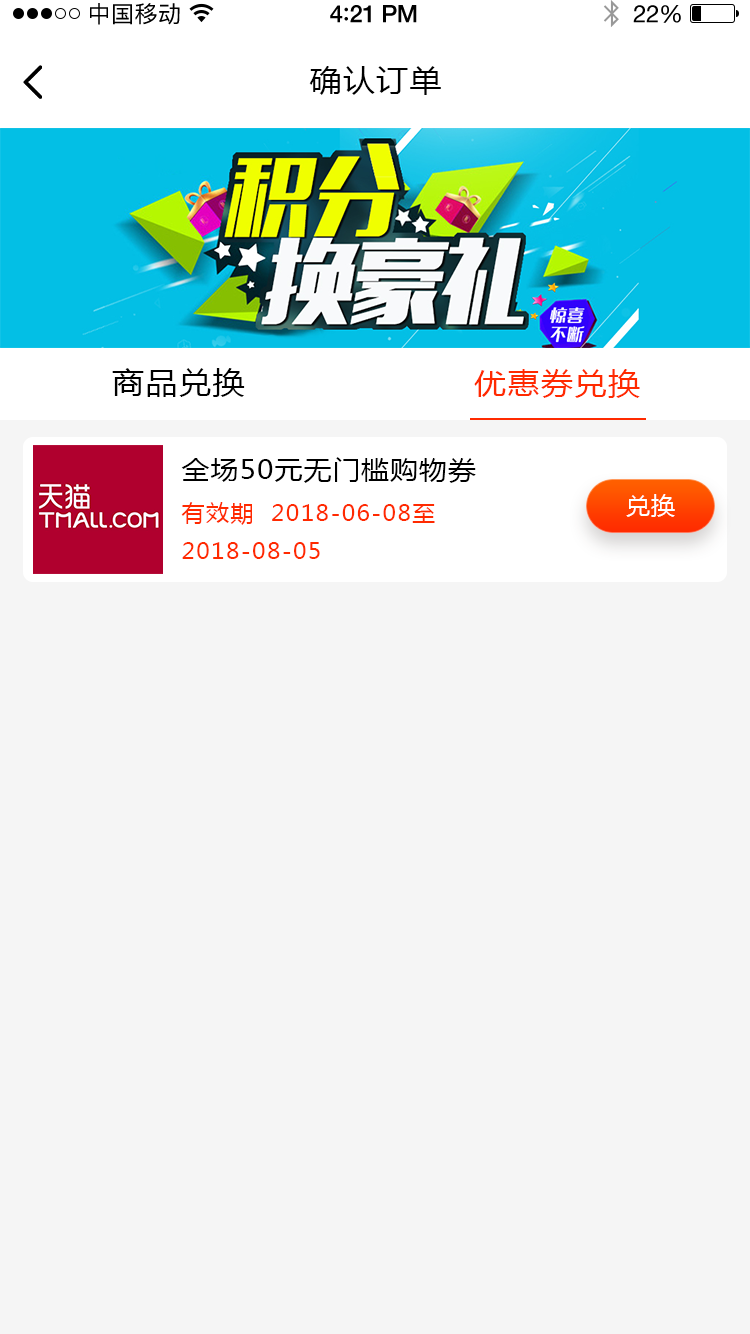
<style>
.page{position:relative;width:750px;height:1334px;background:#f5f5f5}
.page>*{position:absolute;margin:0}
.t1{font:23px "PingFangSC-Regular";letter-spacing:0.02em;color:#000000}
.t2{font:24px "HelveticaNeue-Medium";letter-spacing:-0.02em;color:#000000}
.t3{font:26px "Avenir-Medium";letter-spacing:-0.02em;color:#000000}
.t4{font:24px "HelveticaNeue";letter-spacing:-0.02em;color:#000000}
.t5{font:30px "MicrosoftYaHei";letter-spacing:0.05em;color:#000000;scale:1.06 1}
.t6{font:30px "MicrosoftYaHei";letter-spacing:0.05em;color:#ff2a00;scale:1.06 1}
.t7{font:26px "MicrosoftYaHei";letter-spacing:0.05em;color:#000000;scale:1.06 1}
.t8{font:24px "MicrosoftYaHei";letter-spacing:0.05em;color:#ffffff;text-transform:uppercase}
.t9{font:22px "MicrosoftYaHei";letter-spacing:0.05em;color:#ff2a00;scale:1.06 1}
</style>
<div class="page">
<p class="t1" style="left:90px;top:3px;width:90px;height:22px">中国移动</p>
<p class="t2" style="left:330px;top:5px;width:87px;height:18px">4<span class="t3">:</span>21 PM</p>
<p class="t4" style="left:633px;top:5px;width:48px;height:18px">22%</p>
<p class="t5" style="left:309px;top:66px;width:132px;height:29px">确认订单</p>
<p class="t5" style="left:112px;top:368px;width:133px;height:29px">商品兑换</p>
<p class="t6" style="left:474px;top:369px;width:166px;height:29px">优惠券兑换</p>
<p class="t7" style="left:181px;top:457px;width:295px;height:26px">全场50元无门槛购物券</p>
<p class="t8" style="left:626px;top:494px;width:49px;height:23px">兑换</p>
<p class="t9" style="left:181px;top:502px;width:254px;height:57px">有效期  2018-06-08至<br>2018-08-05</p>
</div>
